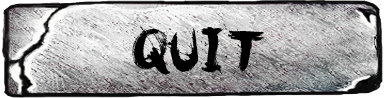
<style>
.page{position:relative;width:384px;height:98px}
.page>*{position:absolute;margin:0}
.t1{font:55px "OhNo";color:#010101}
</style>
<div class="page">
<p class="t1" style="left:126px;top:23px;width:139px;height:52px">QUIT</p>
</div>
